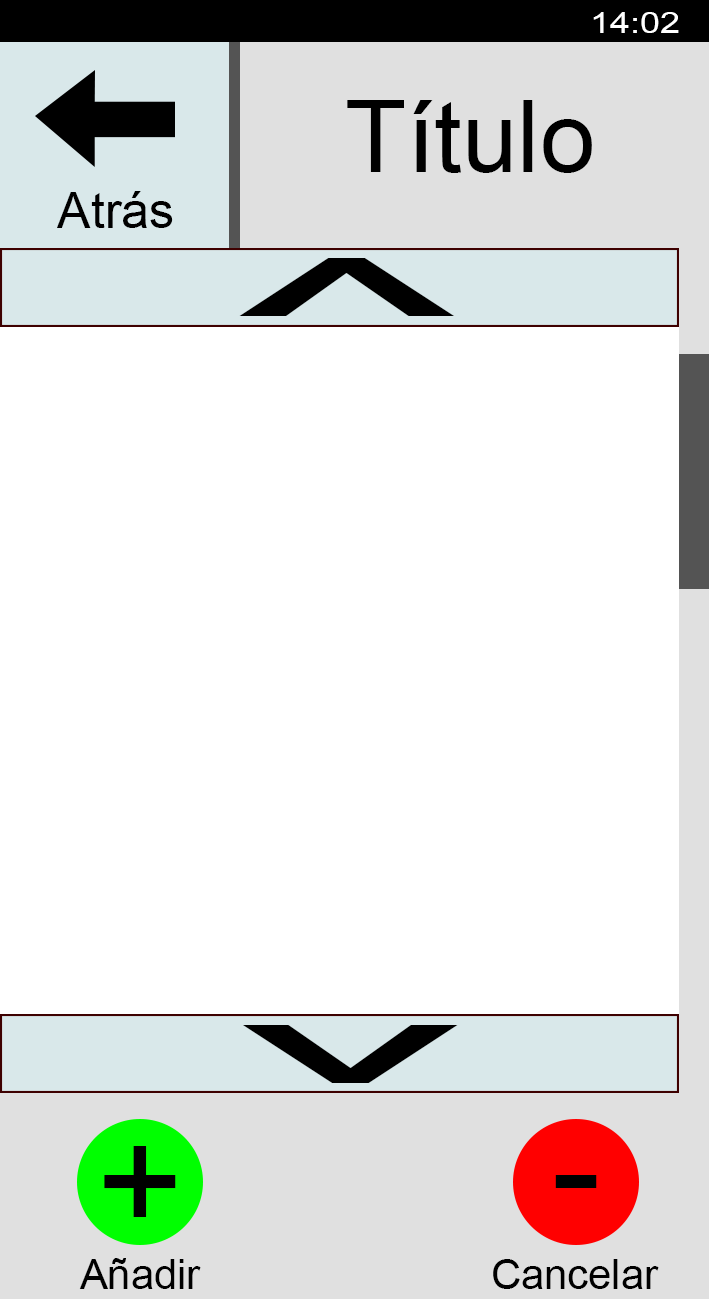
<style>
.page{position:relative;width:709px;height:1299px;background:#ffffff}
.page>*{position:absolute;margin:0}
.t1{font:29.2px "ArialMT";color:#ffffff;scale:1.22 1}
.t2{font:100px "ArialMT";color:#000000}
.t3{font:50px "ArialMT";color:#000000}
.t4{font:150px "ArialMT";color:#000000;scale:3.43 1}
.t5{font:150px "ArialMT";color:#000000}
.t6{font:41.7px "ArialMT";color:#000000}
</style>
<div class="page">
<p class="t1" style="left:593px;top:12px;width:86px;height:21px">14:02</p>
<p class="t2" style="left:347px;top:100px;width:245px;height:73px">Título</p>
<p class="t3" style="left:57px;top:191px;width:116px;height:37px">Atrás</p>
<p class="t4" style="left:239px;top:258px;width:216px;height:58px">^</p>
<p class="t4" style="left:242px;top:1025px;width:216px;height:58px;rotate:180deg">^</p>
<p class="t5" style="left:104px;top:1146px;width:72px;height:71px">+</p>
<p class="t5" style="left:555px;top:1175px;width:42px;height:13px">-</p>
<p class="t6" style="left:79px;top:1258px;width:122px;height:31px">Añadir</p>
<p class="t6" style="left:493px;top:1259px;width:166px;height:30px">Cancelar</p>
</div>
